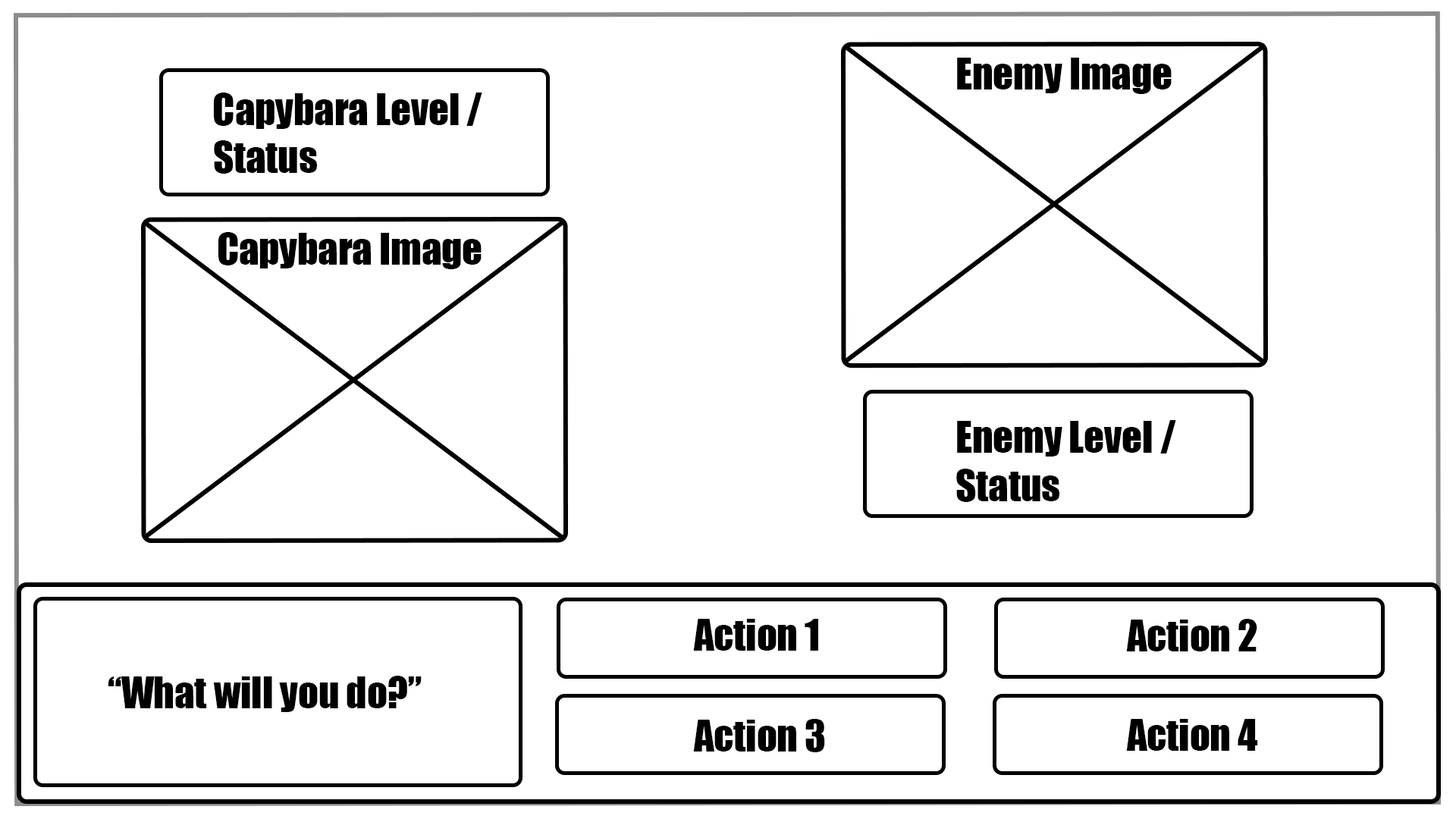
<style>
.page{position:relative;width:1456px;height:819px;background:#ffffff}
.page>*{position:absolute;margin:0}
.t1{font:39.8px "Impact";color:#000000}
</style>
<div class="page">
<p class="t1" style="left:957px;top:58px;width:215px;height:36px">Enemy Image</p>
<p class="t1" style="left:213px;top:93px;width:269px;height:81px">Capybara Level / Status</p>
<p class="t1" style="left:218px;top:232px;width:264px;height:37px">Capybara Image</p>
<p class="t1" style="left:956px;top:420px;width:220px;height:82px">Enemy Level / Status</p>
<p class="t1" style="left:693px;top:619px;width:125px;height:32px">Action 1</p>
<p class="t1" style="left:1126px;top:619px;width:131px;height:32px">Action 2</p>
<p class="t1" style="left:108px;top:676px;width:314px;height:36px">“What will you do?”</p>
<p class="t1" style="left:693px;top:719px;width:132px;height:33px">Action 3</p>
<p class="t1" style="left:1126px;top:719px;width:132px;height:32px">Action 4</p>
</div>
